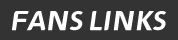
<style>
.page{position:relative;width:178px;height:40px;background:#333333}
.page>*{position:absolute;margin:0}
.t1{font:22px "DOUYUFont";color:#ffffff}
</style>
<div class="page">
<p class="t1" style="left:11px;top:11px;width:155px;height:20px">FANS LINKS</p>
</div>
